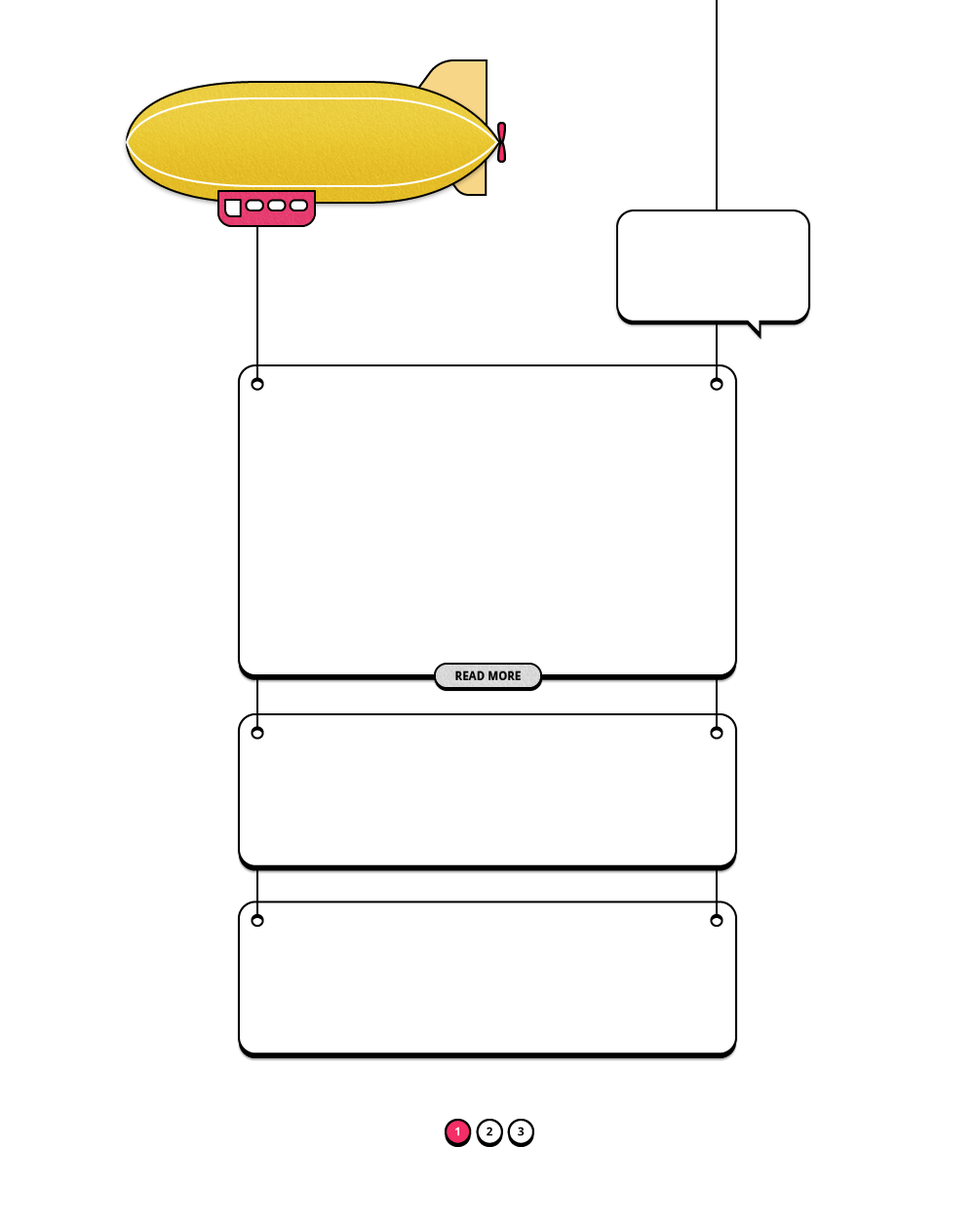
<style>
.page{position:relative;width:975px;height:1223px;background:#ffffff}
.page>*{position:absolute;margin:0}
.t1{font:11.7px "DroidSans-Bold";color:#000000}
</style>
<div class="page">
<p class="t1" style="left:455px;top:672px;width:66px;height:8px">READ MORE</p>
</div>
